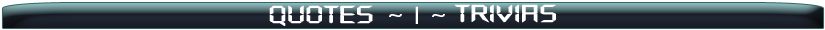
<style>
.page{position:relative;width:825px;height:30px}
.page>*{position:absolute;margin:0}
.t1{font:23.9px "DigifaceWide";color:#ffffff;font-weight:bold}
.t2{font:23.9px "DigifaceWide";color:#ffffff}
</style>
<div class="page">
<p class="t1" style="left:269px;top:5px;width:104px;height:21px">Quotes</p>
<p class="t2" style="left:389px;top:6px;width:56px;height:18px">~ | ~</p>
<p class="t1" style="left:454px;top:4px;width:102px;height:19px">Trivias</p>
</div>
